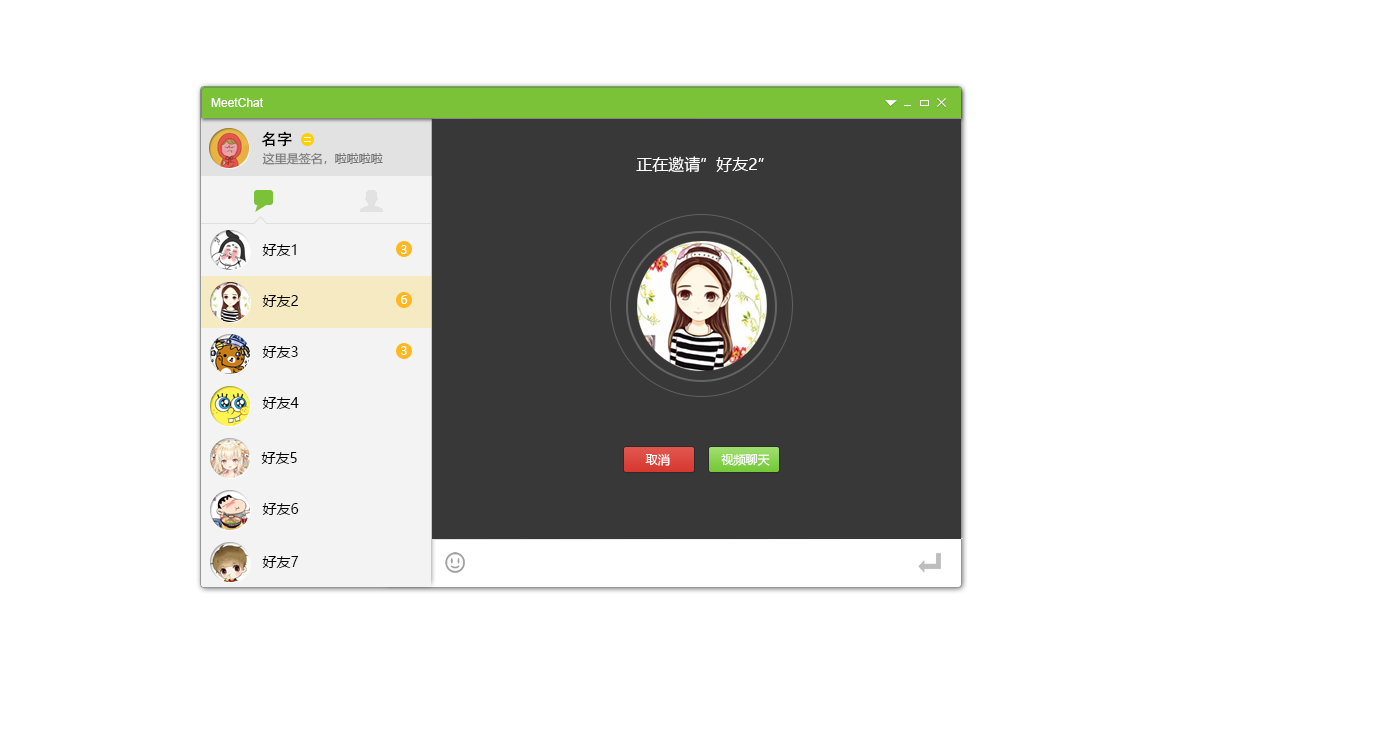
<style>
.page{position:relative;width:1400px;height:752px;background:#ffffff}
.page>*{position:absolute;margin:0}
.t1{font:12px "ArialMT";color:#ffffff}
.t2{font:16px "AdobeHeitiStd-Regular";color:#000000}
.t3{font:12px "MicrosoftYaHei";color:#767676}
.t4{font:16px "MicrosoftYaHei";color:#ffffff}
.t5{font:14px "MicrosoftYaHei";color:#000000}
.t6{font:12px "MicrosoftYaHei";color:#ffffff}
</style>
<div class="page">
<p class="t1" style="left:211px;top:98px;width:52px;height:9px">MeetChat</p>
<p class="t2" style="left:261px;top:131px;width:31px;height:16px">名字</p>
<p class="t3" style="left:262px;top:152px;width:121px;height:13px">这里是签名，啦啦啦啦</p>
<p class="t4" style="left:636px;top:156px;width:128px;height:17px">正在邀请”好友2”</p>
<p class="t5" style="left:262px;top:244px;width:34px;height:12px">好友1</p>
<p class="t6" style="left:401px;top:245px;width:6px;height:9px">3</p>
<p class="t5" style="left:262px;top:295px;width:37px;height:12px">好友2</p>
<p class="t6" style="left:401px;top:295px;width:7px;height:9px">6</p>
<p class="t5" style="left:262px;top:346px;width:36px;height:12px">好友3</p>
<p class="t6" style="left:401px;top:346px;width:6px;height:9px">3</p>
<p class="t5" style="left:262px;top:397px;width:37px;height:12px">好友4</p>
<p class="t5" style="left:261px;top:452px;width:36px;height:12px">好友5</p>
<p class="t6" style="left:645px;top:453px;width:25px;height:13px">取消</p>
<p class="t6" style="left:721px;top:454px;width:49px;height:12px">视频聊天</p>
<p class="t5" style="left:262px;top:503px;width:37px;height:12px">好友6</p>
<p class="t5" style="left:262px;top:556px;width:37px;height:12px">好友7</p>
</div>
